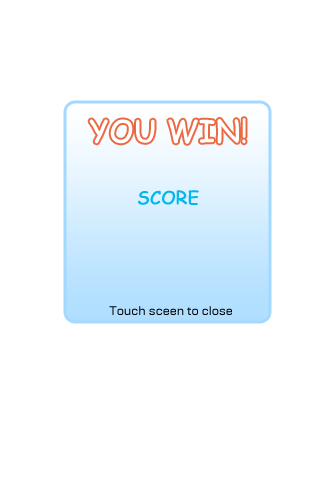
<style>
.page{position:relative;width:320px;height:480px;background:#ffffff}
.page>*{position:absolute;margin:0}
.t1{font:30px "ComicSansMS";color:#ffffff;font-weight:bold}
.t2{font:18px "ComicSansMS";color:#00b7ee;font-weight:bold}
.t3{font:12px "Moire";color:#000000}
</style>
<div class="page">
<p class="t1" style="left:89px;top:118px;width:157px;height:26px">YOU WIN!</p>
<p class="t2" style="left:138px;top:190px;width:61px;height:15px">SCORE</p>
<p class="t3" style="left:109px;top:306px;width:123px;height:9px">Touch sceen to close</p>
</div>
